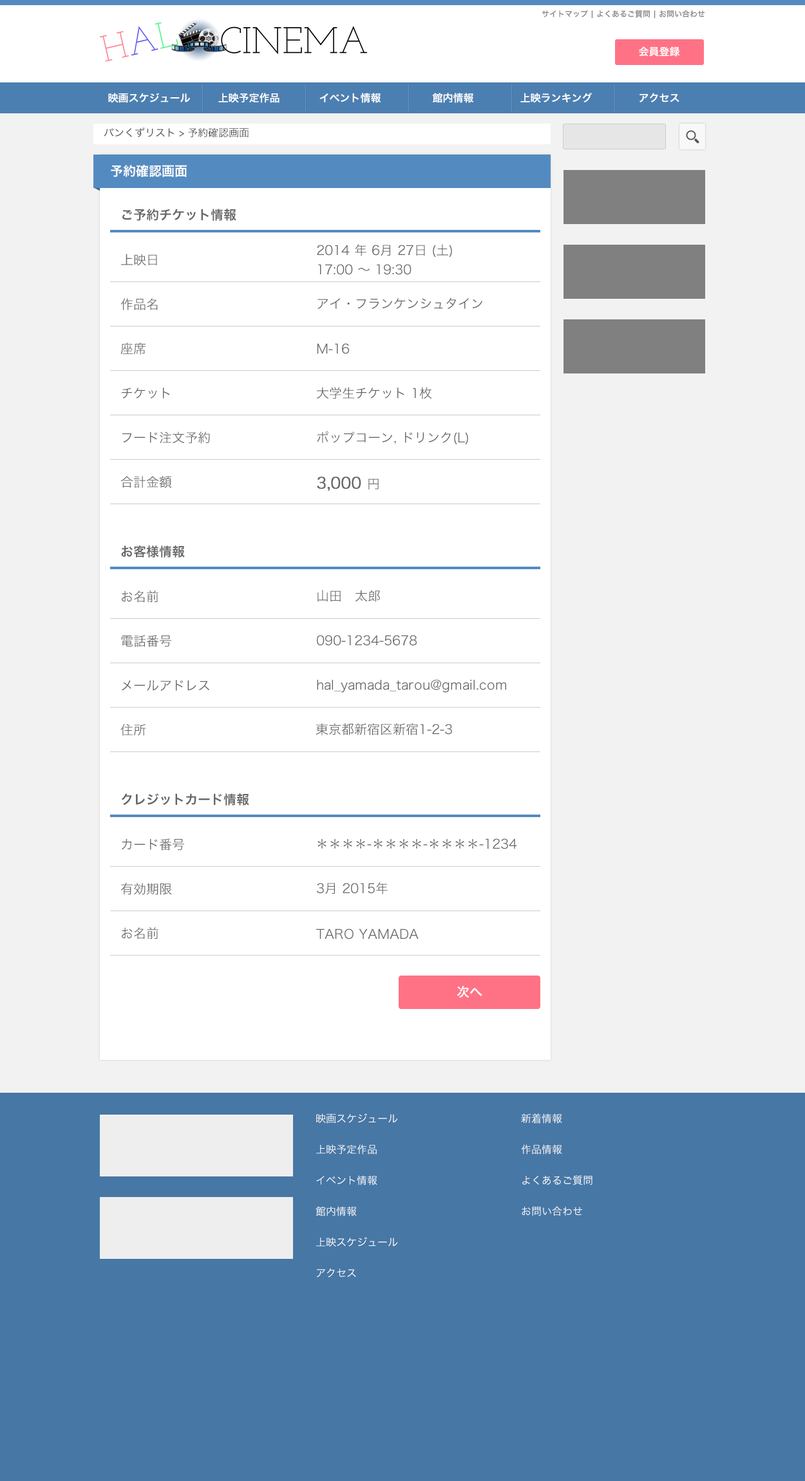
<style>
.page{position:relative;width:805px;height:1481px;background:#ffffff}
.page>*{position:absolute;margin:0}
.t1{font:7.7px "HiraKakuProN-W6";color:#888888}
.t2{font:10.3px "HiraKakuProN-W6";color:#ffffff}
.t3{font:10.3px "HiraKakuProN-W3";color:#333333}
.t4{font:12.9px "HiraKakuProN-W6";color:#ffffff}
.t5{font:12.9px "HiraKakuProN-W6";color:#666666}
.t6{font:12.9px/19.3px "HiraKakuProN-W3";color:#666666}
.t7{font:12.9px "HiraKakuProN-W3";color:#666666}
.t8{font:15.5px "HiraKakuProN-W3";color:#666666;font-weight:bold}
.t9{font:10.3px/15.5px "HiraKakuProN-W3";color:#ffffff}
</style>
<div class="page">
<p class="t1" style="left:542px;top:10px;width:163px;height:9px">サイトマップ | よくあるご質問 | お問い合わせ</p>
<p class="t2" style="left:639px;top:46px;width:41px;height:11px">会員登録</p>
<p class="t2" style="left:108px;top:93px;width:82px;height:10px">映画スケジュール</p>
<p class="t2" style="left:218px;top:93px;width:62px;height:10px">上映予定作品</p>
<p class="t2" style="left:319px;top:93px;width:62px;height:10px">イベント情報</p>
<p class="t2" style="left:432px;top:93px;width:42px;height:10px">館内情報</p>
<p class="t2" style="left:520px;top:93px;width:72px;height:10px">上映ランキング</p>
<p class="t2" style="left:640px;top:93px;width:39px;height:9px">アクセス</p>
<p class="t3" style="left:104px;top:128px;width:145px;height:10px">パンくずリスト &gt; 予約確認画面</p>
<p class="t4" style="left:111px;top:164px;width:76px;height:13px">予約確認画面</p>
<p class="t5" style="left:122px;top:209px;width:114px;height:12px">ご予約チケット情報</p>
<p class="t6" style="left:317px;top:244px;width:135px;height:31px">2014 年 6月 27日 (土)<br>17:00 〜 19:30</p>
<p class="t7" style="left:121px;top:254px;width:36px;height:12px">上映日</p>
<p class="t7" style="left:120px;top:298px;width:38px;height:12px">作品名</p>
<p class="t7" style="left:318px;top:298px;width:164px;height:11px">アイ・フランケンシュタイン</p>
<p class="t7" style="left:120px;top:343px;width:26px;height:12px">座席</p>
<p class="t7" style="left:317px;top:343px;width:32px;height:11px">M-16</p>
<p class="t7" style="left:121px;top:388px;width:49px;height:11px">チケット</p>
<p class="t7" style="left:317px;top:387px;width:115px;height:12px">大学生チケット 1枚</p>
<p class="t7" style="left:122px;top:431px;width:88px;height:13px">フード注文予約</p>
<p class="t7" style="left:317px;top:431px;width:151px;height:14px">ポップコーン, ドリンク(L)</p>
<p class="t7" style="left:120px;top:476px;width:52px;height:12px">合計金額</p>
<p class="t8" style="left:317px;top:477px;width:62px;height:14px">3,000 <span class="t7">円</span></p>
<p class="t5" style="left:121px;top:545px;width:64px;height:13px">お客様情報</p>
<p class="t7" style="left:122px;top:591px;width:36px;height:12px">お名前</p>
<p class="t7" style="left:318px;top:590px;width:62px;height:12px">山田　太郎</p>
<p class="t7" style="left:121px;top:635px;width:50px;height:12px">電話番号</p>
<p class="t7" style="left:317px;top:635px;width:100px;height:11px">090-1234-5678</p>
<p class="t7" style="left:122px;top:680px;width:87px;height:11px">メールアドレス</p>
<p class="t7" style="left:317px;top:679px;width:189px;height:14px">hal_yamada_tarou@gmail.com</p>
<p class="t7" style="left:120px;top:724px;width:26px;height:12px">住所</p>
<p class="t7" style="left:316px;top:723px;width:136px;height:12px">東京都新宿区新宿1-2-3</p>
<p class="t5" style="left:121px;top:793px;width:128px;height:13px">クレジットカード情報</p>
<p class="t7" style="left:122px;top:839px;width:62px;height:12px">カード番号</p>
<p class="t7" style="left:318px;top:839px;width:199px;height:10px">＊＊＊＊-＊＊＊＊-＊＊＊＊-1234</p>
<p class="t7" style="left:120px;top:883px;width:52px;height:12px">有効期限</p>
<p class="t7" style="left:317px;top:882px;width:71px;height:13px">3月 2015年</p>
<p class="t7" style="left:122px;top:927px;width:36px;height:13px">お名前</p>
<p class="t7" style="left:316px;top:929px;width:103px;height:11px">TARO YAMADA</p>
<p class="t4" style="left:457px;top:986px;width:25px;height:12px">次へ</p>
<p class="t9" style="left:316px;top:1114px;width:82px;height:164px">映画スケジュール<br><br>上映予定作品<br><br>イベント情報<br><br>館内情報<br><br>上映スケジュール<br><br>アクセス</p>
<p class="t9" style="left:521px;top:1114px;width:71px;height:102px">新着情報<br><br>作品情報<br><br>よくあるご質問<br><br>お問い合わせ</p>
</div>
